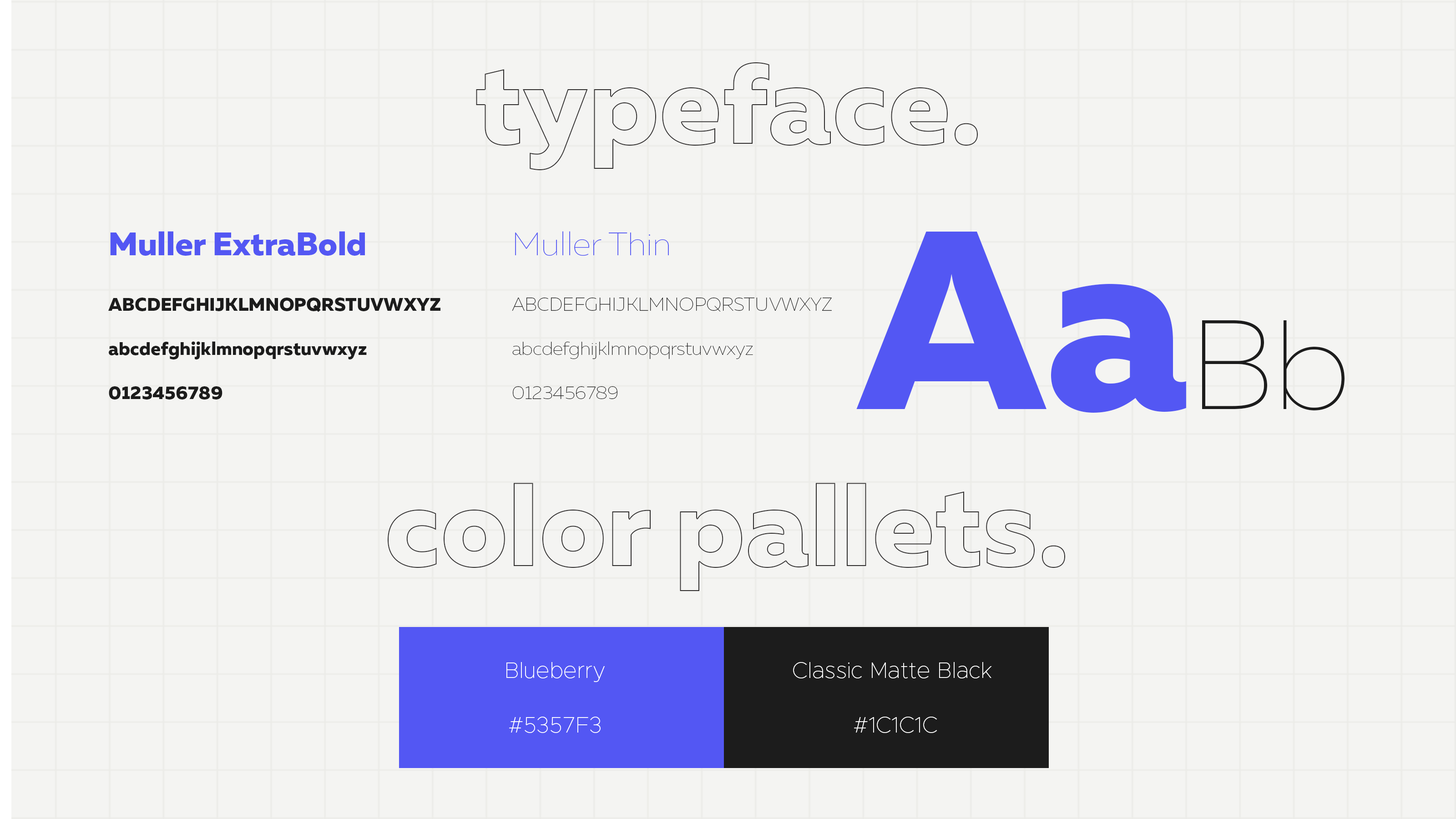
<style>
.page{position:relative;width:1456px;height:819px;background:#f4f4f2}
.page>*{position:absolute;margin:0}
.t1{font:18.4px "MullerExtraBoldDEMO";color:#1c1c1c}
.t2{font:32.7px "MullerExtraBoldDEMO";color:#5357f3}
.t3{font:18.4px "MullerThinDEMO";color:#1c1c1c}
.t4{font:32.7px "MullerThinDEMO";color:#5357f3}
.t5{font:253.3px "MullerExtraBoldDEMO";color:#5357f3}
.t6{font:126.7px "MullerThinDEMO";color:#1c1c1c}
.t7{font:22.7px "Metropolis-Thin";color:#ffffff}
</style>
<div class="page">
<p class="t1" style="left:108px;top:231px;width:332px;height:168px"><span class="t2">Muller ExtraBold<br><br></span>ABCDEFGHIJKLMNOPQRSTUVWXYZ<br><br>abcdefghijklmnopqrstuvwxyz<br><br>0123456789</p>
<p class="t3" style="left:512px;top:231px;width:320px;height:168px"><span class="t4">Muller Thin<br><br></span>ABCDEFGHIJKLMNOPQRSTUVWXYZ<br><br>abcdefghijklmnopqrstuvwxyz<br><br>0123456789</p>
<p class="t5" style="left:856px;top:232px;width:489px;height:181px">Aa<span class="t6">Bb</span></p>
<p class="t7" style="left:506px;top:662px;width:99px;height:71px;text-align:center">Blueberry<br> <br>#5357F3</p>
<p class="t7" style="left:793px;top:662px;width:199px;height:71px;text-align:center">Classic Matte Black <br><br>#1C1C1C</p>
</div>
